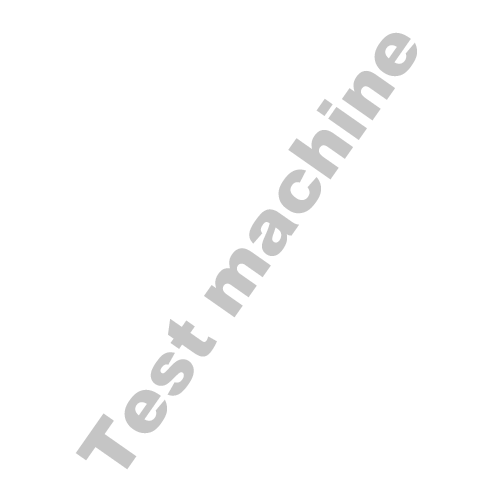
<style>
.page{position:relative;width:500px;height:500px;background:#ffffff}
.page>*{position:absolute;margin:0}
.t1{font:72px "Arial-Black";color:#c5c5c5}
</style>
<div class="page">
<p class="t1" style="left:75px;top:32px;width:342px;height:438px;rotate:-55deg">Test machine</p>
</div>
